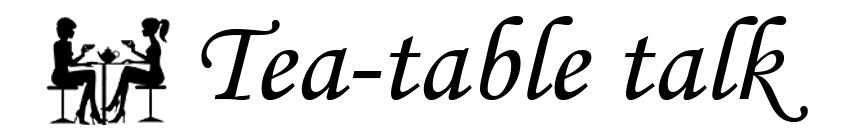
<style>
.page{position:relative;width:850px;height:140px;background:#ffffff}
.page>*{position:absolute;margin:0}
.t1{font:120px "MonotypeCorsiva";color:#000000}
</style>
<div class="page">
<p class="t1" style="left:201px;top:16px;width:607px;height:106px">Tea-table talk</p>
</div>
